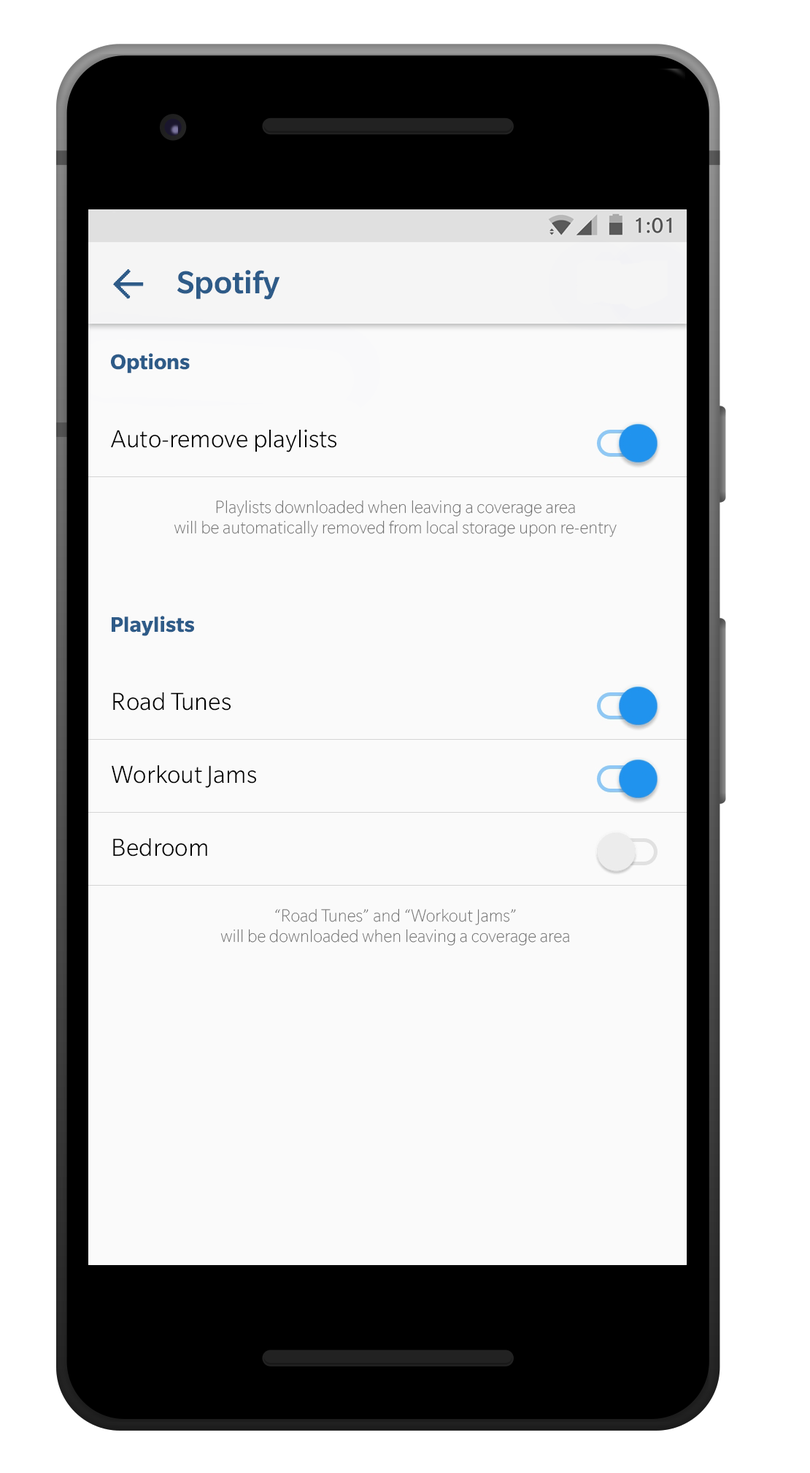
<style>
.page{position:relative;width:810px;height:1473px;background:#fafafa}
.page>*{position:absolute;margin:0}
.t1{font:30.5px "SlateForOnePlusMedium";color:#2e5b88}
.t2{font:20.4px "SlateForOnePlus-Bold";color:#2e5b88}
.t3{font:23.8px "SlateForOnePlusLight";color:#000000}
.t4{font:16.8px "SlateForOnePlusThin";color:#696969}
</style>
<div class="page">
<p class="t1" style="left:177px;top:270px;width:103px;height:30px">Spotify</p>
<p class="t2" style="left:111px;top:353px;width:79px;height:20px">Options</p>
<p class="t3" style="left:111px;top:429px;width:225px;height:23px">Auto-remove playlists</p>
<p class="t4" style="left:174px;top:500px;width:442px;height:37px;text-align:center">Playlists downloaded when leaving a coverage area<br>will be automatically removed from local storage upon re-entry</p>
<p class="t2" style="left:112px;top:616px;width:82px;height:20px">Playlists</p>
<p class="t3" style="left:113px;top:692px;width:118px;height:18px">Road Tunes</p>
<p class="t3" style="left:112px;top:765px;width:144px;height:23px">Workout Jams</p>
<p class="t3" style="left:113px;top:838px;width:94px;height:18px">Bedroom</p>
<p class="t4" style="left:220px;top:908px;width:349px;height:37px;text-align:center">“Road Tunes” and “Workout Jams”<br>will be downloaded when leaving a coverage area</p>
</div>
